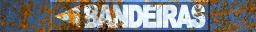
<style>
.page{position:relative;width:256px;height:32px}
.page>*{position:absolute;margin:0}
.t1{font:30.7px "Arial-Black";letter-spacing:-0.1em;text-transform:uppercase;font-weight:bold;scale:0.67 1}
</style>
<div class="page">
<p class="t1" style="left:84px;top:4px;width:122px;height:24px">bandeiras</p>
</div>
